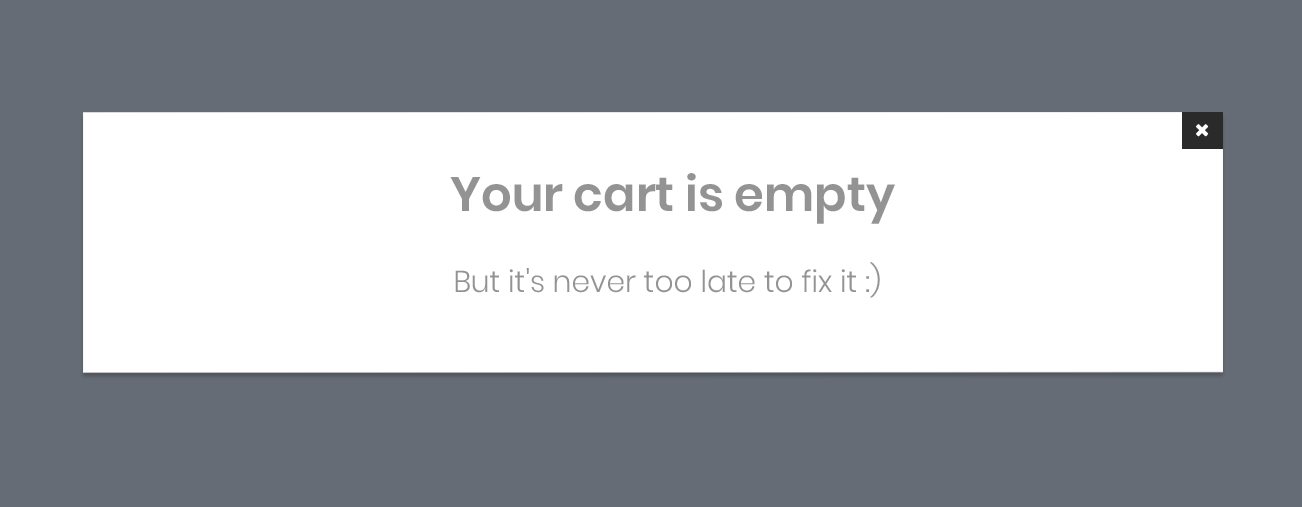
<style>
.page{position:relative;width:1302px;height:507px;background:#666c75}
.page>*{position:absolute;margin:0}
.t1{font:48px "Poppins-SemiBold";color:#939393}
.t2{font:30px "Poppins-Light";color:#939393}
</style>
<div class="page">
<p class="t1" style="left:450px;top:173px;width:445px;height:51px">Your cart is empty</p>
<p class="t2" style="left:455px;top:262px;width:425px;height:36px">But it's never too late to fix it :)</p>
</div>
